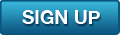
<style>
.page{position:relative;width:120px;height:35px}
.page>*{position:absolute;margin:0}
.t1{font:19px "HelveticaNeue-Bold";color:#ffffff}
</style>
<div class="page">
<p class="t1" style="left:22px;top:10px;width:78px;height:14px">SIGN UP</p>
</div>
